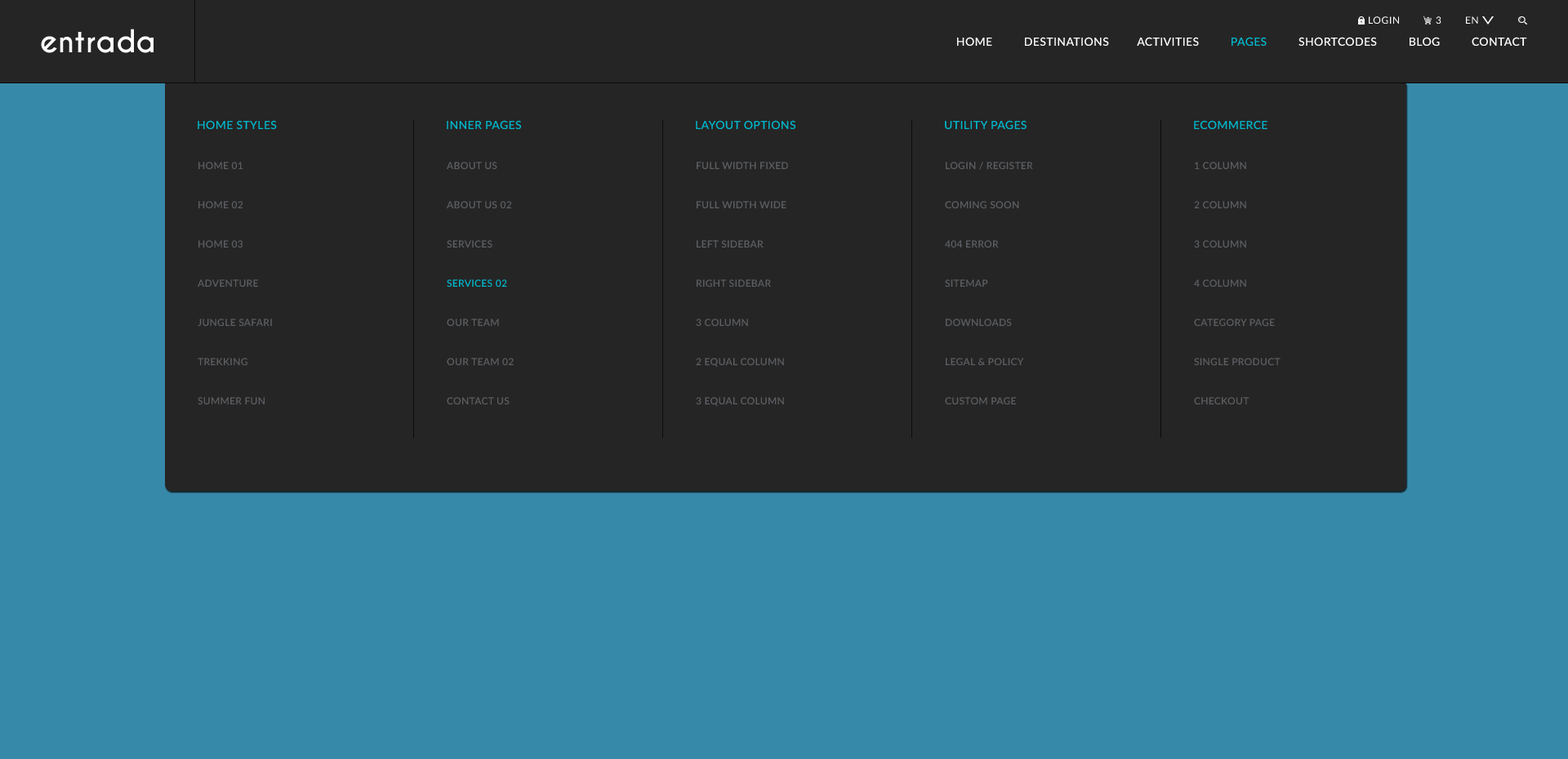
<style>
.page{position:relative;width:1568px;height:759px;background:#252525}
.page>*{position:absolute;margin:0}
.t1{font:9.8px "Lato-Regular";letter-spacing:0.05em;color:#ffffff}
.t2{font:29.4px "CaviarDreams-Bold";color:#ffffff}
.t3{font:11.4px "Lato-Semibold";letter-spacing:0.025em;color:#ffffff}
.t4{font:11.4px "Lato-Semibold";letter-spacing:0.025em;color:#01b7cc}
.t5{font:9.8px/19.6px "Lato-Semibold";letter-spacing:0.025em;color:#5c5e62}
.t6{font:9.8px/19.6px "Lato-Semibold";letter-spacing:0.025em;color:#01b7cc}
</style>
<div class="page">
<p class="t1" style="left:1369px;top:16px;width:30px;height:8px">LOGIN</p>
<p class="t1" style="left:1436px;top:16px;width:5px;height:8px">3</p>
<p class="t1" style="left:1466px;top:16px;width:12px;height:8px">EN</p>
<p class="t2" style="left:41px;top:29px;width:113px;height:24px">entrada</p>
<p class="t3" style="left:957px;top:37px;width:570px;height:9px">HOME          DESTINATIONS         ACTIVITIES          <span class="t4">PAGES</span>          SHORTCODES          BLOG          CONTACT</p>
<p class="t4" style="left:198px;top:120px;width:79px;height:9px">HOME STYLES</p>
<p class="t4" style="left:447px;top:120px;width:74px;height:9px">INNER PAGES</p>
<p class="t4" style="left:696px;top:120px;width:99px;height:9px">LAYOUT OPTIONS</p>
<p class="t4" style="left:945px;top:120px;width:82px;height:9px">UTILITY PAGES</p>
<p class="t4" style="left:1194px;top:120px;width:73px;height:9px">ECOMMERCE</p>
<p class="t5" style="left:198px;top:162px;width:74px;height:242px">HOME 01<br><br>HOME 02<br><br>HOME 03<br><br>ADVENTURE<br><br>JUNGLE SAFARI<br><br>TREKKING<br><br>SUMMER FUN</p>
<p class="t5" style="left:447px;top:162px;width:67px;height:242px">ABOUT US<br><br>ABOUT US 02<br><br>SERVICES<br><br><span class="t6">SERVICES 02<br></span><br>OUR TEAM <br><br>OUR TEAM 02<br><br>CONTACT US</p>
<p class="t5" style="left:696px;top:162px;width:92px;height:244px">FULL WIDTH FIXED<br><br>FULL WIDTH WIDE<br><br>LEFT SIDEBAR<br><br>RIGHT SIDEBAR<br><br>3 COLUMN<br><br>2 EQUAL COLUMN<br><br>3 EQUAL COLUMN</p>
<p class="t5" style="left:945px;top:162px;width:88px;height:242px">LOGIN / REGISTER<br><br>COMING SOON<br><br>404 ERROR<br><br>SITEMAP<br><br>DOWNLOADS<br><br>LEGAL &amp; POLICY<br><br>CUSTOM PAGE</p>
<p class="t5" style="left:1194px;top:162px;width:87px;height:242px">1 COLUMN<br><br>2 COLUMN<br><br>3 COLUMN<br><br>4 COLUMN<br><br>CATEGORY PAGE<br><br>SINGLE PRODUCT<br><br>CHECKOUT</p>
</div>
